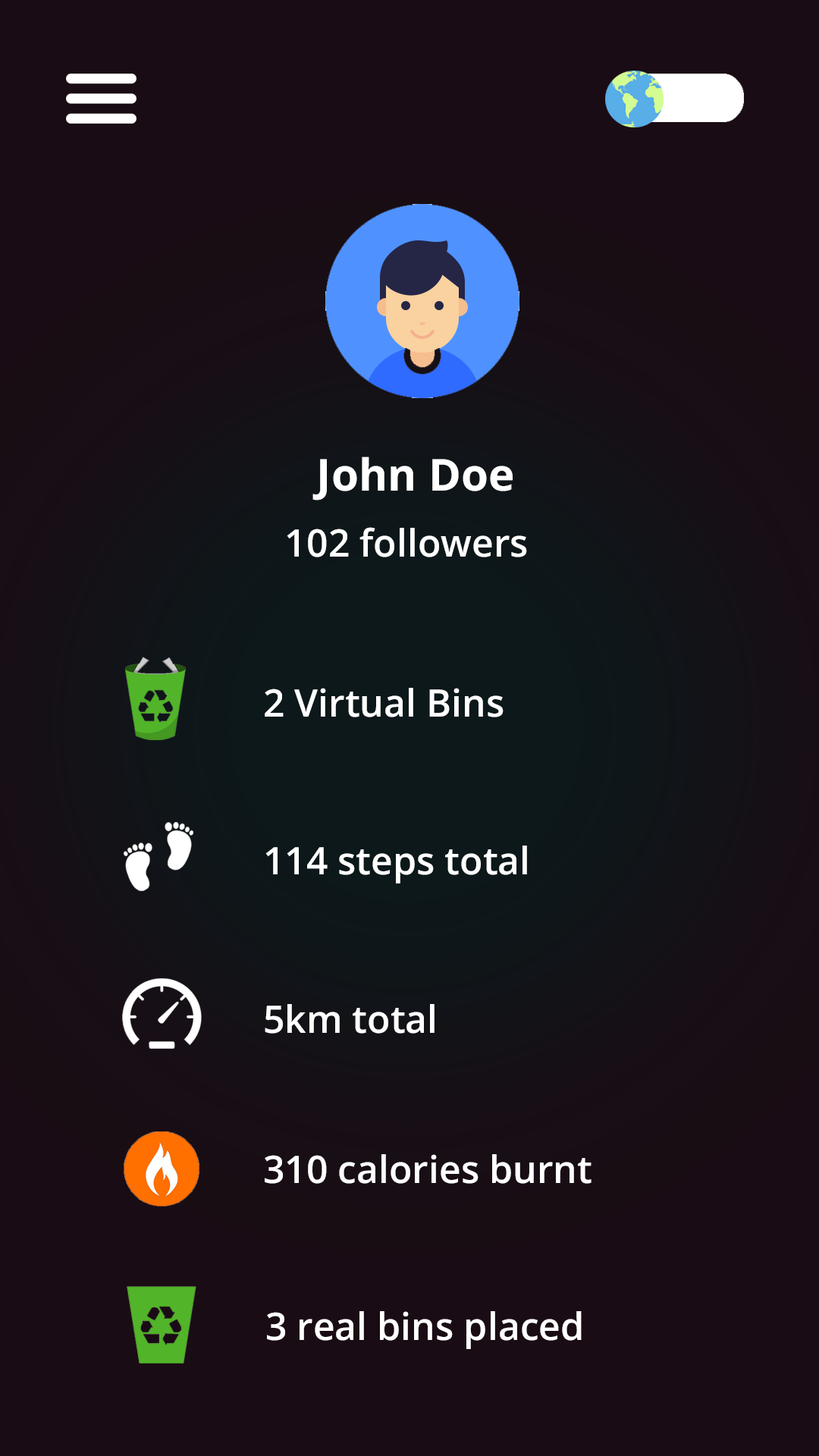
<style>
.page{position:relative;width:819px;height:1456px;background:#1a0c14}
.page>*{position:absolute;margin:0}
.t1{font:44.2px "OpenSans-Bold";color:#ffffff}
.t2{font:37.9px "OpenSans-Semibold";color:#ffffff}
.t3{font:9.1px "OpenSans-Semibold";color:#ffffff}
</style>
<div class="page">
<p class="t1" style="left:312px;top:457px;width:201px;height:43px">John Doe</p>
<p class="t2" style="left:287px;top:527px;width:240px;height:30px">102 followers</p>
<p class="t3" style="left:265px;top:688px;width:239px;height:29px">2 Virtual Bins</p>
<p class="t3" style="left:265px;top:846px;width:262px;height:37px">114 steps total</p>
<p class="t3" style="left:265px;top:1004px;width:170px;height:30px">5km total</p>
<p class="t3" style="left:265px;top:1154px;width:326px;height:30px">310 calories burnt</p>
<p class="t3" style="left:267px;top:1311px;width:315px;height:38px">3 real bins placed</p>
</div>
